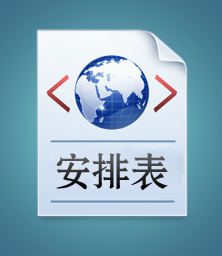
<style>
.page{position:relative;width:222px;height:256px}
.page>*{position:absolute;margin:0}
.t1{font:38px "FZSHK--GBK1-0"}
</style>
<div class="page">
<p class="t1" style="left:56px;top:153px;width:112px;height:38px">安排表</p>
</div>
